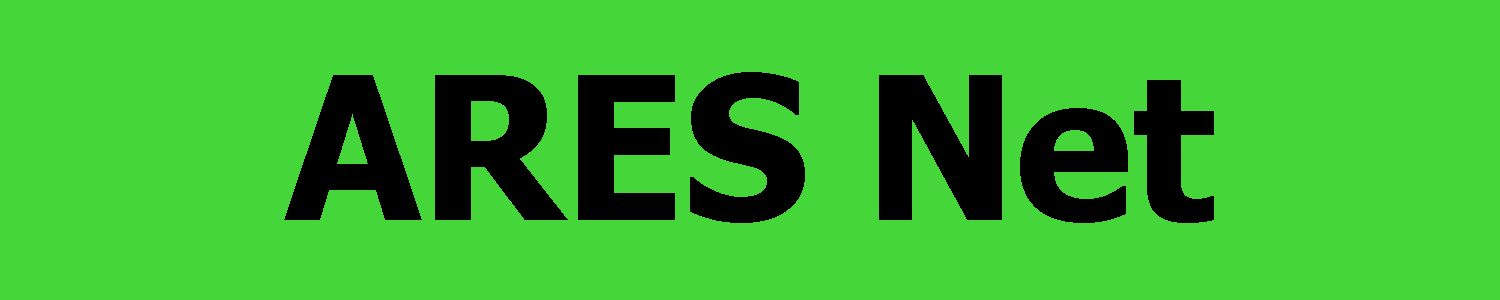
<style>
.page{position:relative;width:1500px;height:300px;background:#45d73a}
.page>*{position:absolute;margin:0}
.t1{font:199.3px "Tahoma-Bold";letter-spacing:-0.01em;color:#000000}
</style>
<div class="page">
<p class="t1" style="left:284px;top:72px;width:930px;height:151px">ARES Net</p>
</div>
